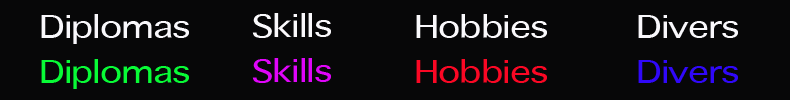
<style>
.page{position:relative;width:790px;height:100px;background:#070708}
.page>*{position:absolute;margin:0}
.t1{font:42.4px "AppleSymbols";letter-spacing:-0.02em;color:#f9f8fc;scale:1.22 1}
.t2{font:42.4px "AppleSymbols";letter-spacing:-0.02em;color:#faf9fc;scale:1.22 1}
.t3{font:42.4px "AppleSymbols";letter-spacing:-0.02em;color:#08fb36;scale:1.22 1}
.t4{font:42.4px "AppleSymbols";letter-spacing:-0.02em;color:#e005fa;scale:1.22 1}
.t5{font:42.4px "AppleSymbols";letter-spacing:-0.02em;color:#fb0724;scale:1.22 1}
.t6{font:42.4px "AppleSymbols";letter-spacing:-0.02em;color:#3008f9;scale:1.22 1}
</style>
<div class="page">
<p class="t1" style="left:41px;top:14px;width:148px;height:30px">Diplomas</p>
<p class="t2" style="left:252px;top:13px;width:79px;height:25px">Skills</p>
<p class="t2" style="left:416px;top:14px;width:131px;height:24px">Hobbies</p>
<p class="t1" style="left:638px;top:15px;width:100px;height:23px">Divers</p>
<p class="t3" style="left:41px;top:59px;width:148px;height:30px">Diplomas</p>
<p class="t4" style="left:252px;top:58px;width:79px;height:25px">Skills</p>
<p class="t5" style="left:416px;top:59px;width:131px;height:24px">Hobbies</p>
<p class="t6" style="left:638px;top:60px;width:100px;height:23px">Divers</p>
</div>
